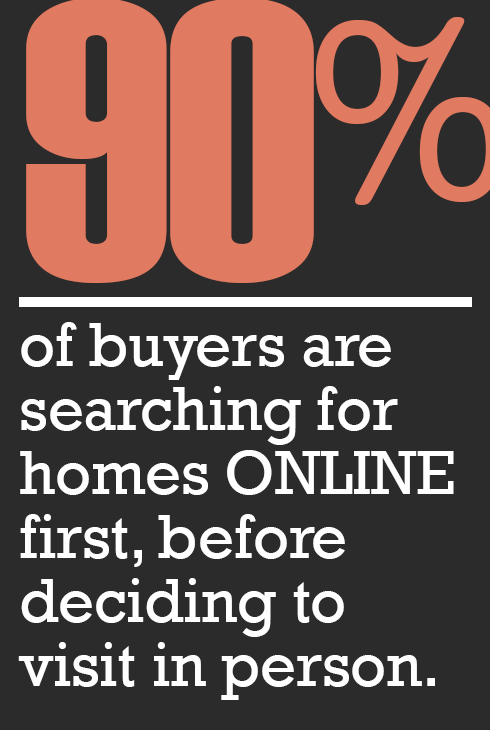
<style>
.page{position:relative;width:490px;height:730px;background:#2b2b2b}
.page>*{position:absolute;margin:0}
.t1{font:400px "Haettenschweiler";color:#e07a61}
.t2{font:64px/64px "Rockwell";letter-spacing:-0.005em;color:#ffffff}
</style>
<div class="page">
<p class="t1" style="left:26px;top:0px;width:288px;height:283px">90</p>
<p class="t2" style="left:18px;top:322px;width:436px;height:378px">of buyers are searching for homes ONLINE first, before deciding to visit in person.</p>
</div>
